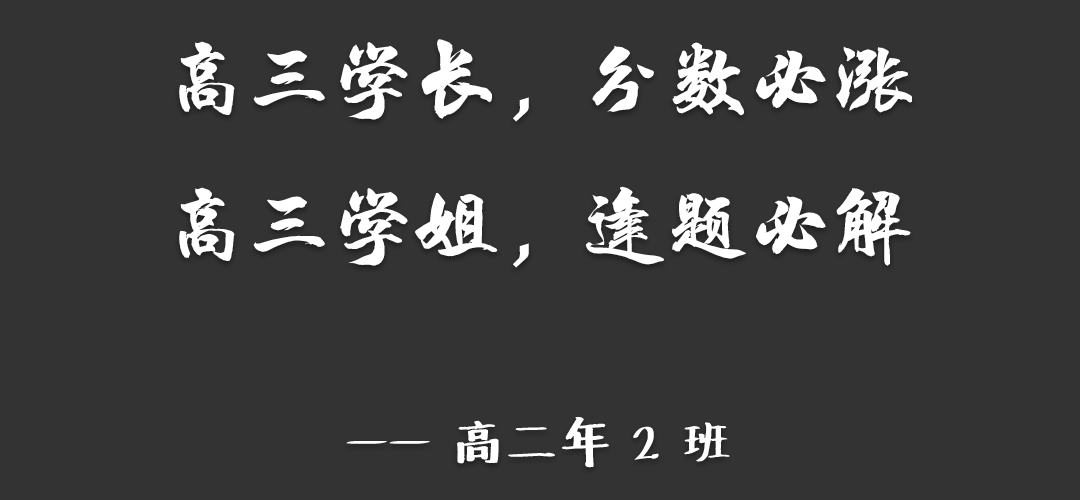
<style>
.page{position:relative;width:1080px;height:500px;background:#333333}
.page>*{position:absolute;margin:0}
.t1{font:83.3px "HYChengXingJ";color:#ffffff}
.t2{font:50px "Undefined";color:#ffffff}
</style>
<div class="page">
<p class="t1" style="left:179px;top:39px;width:733px;height:429px;text-align:center">高三学长，分数必涨<br>高三学姐，逢题必解<br><span class="t2"><br>—— 高二年 2 班</span></p>
</div>
